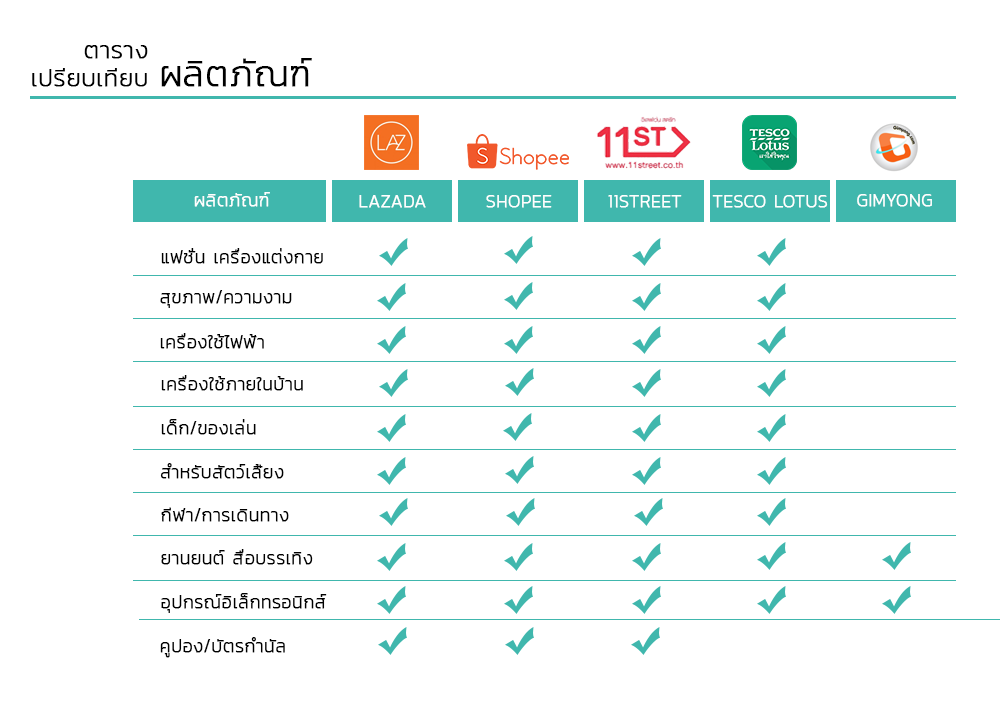
<style>
.page{position:relative;width:1000px;height:726px;background:#ffffff}
.page>*{position:absolute;margin:0}
.t1{font:24px/28px "Kanit-ExtraLight";color:#000000;font-weight:bold}
.t2{font:36px/28px "Kanit-ExtraLight";color:#000000;font-weight:bold}
.t3{font:18px "Kanit-ExtraLight";color:#ffffff;font-weight:bold}
.t4{font:18px "Kanit-ExtraLight";color:#000000;font-weight:bold}
</style>
<div class="page">
<p class="t1" style="left:32px;top:45px;width:280px;height:42px">ตาราง<br>เปรียบเทียบ <span class="t2">ผลิตภัณฑ์</span></p>
<p class="t3" style="left:194px;top:192px;width:76px;height:15px">ผลิตภัณฑ์</p>
<p class="t3" style="left:359px;top:195px;width:67px;height:13px">LAZADA</p>
<p class="t3" style="left:486px;top:195px;width:66px;height:13px">SHOPEE</p>
<p class="t3" style="left:608px;top:195px;width:74px;height:13px">11STREET</p>
<p class="t3" style="left:712px;top:195px;width:116px;height:13px">TESCO LOTUS</p>
<p class="t3" style="left:857px;top:194px;width:75px;height:13px">GIMYONG</p>
<p class="t4" style="left:161px;top:248px;width:162px;height:16px">แฟชั่น เครื่องแต่งกาย</p>
<p class="t4" style="left:160px;top:290px;width:132px;height:18px">สุขภาพ/ความงาม</p>
<p class="t4" style="left:160px;top:333px;width:104px;height:16px">เครื่องใช้ไฟฟ้า</p>
<p class="t4" style="left:161px;top:375px;width:142px;height:16px">เครื่องใช้ภายในบ้าน</p>
<p class="t4" style="left:161px;top:419px;width:95px;height:16px">เด็ก/ของเล่น</p>
<p class="t4" style="left:160px;top:463px;width:124px;height:16px">สำหรับสัตว์เลี้ยง</p>
<p class="t4" style="left:161px;top:507px;width:128px;height:15px">กีฬา/การเดินทาง</p>
<p class="t4" style="left:161px;top:549px;width:152px;height:16px">ยานยนต์ สื่อบรรเทิง</p>
<p class="t4" style="left:161px;top:593px;width:166px;height:20px">อุปกรณ์อิเล็กทรอนิกส์</p>
<p class="t4" style="left:160px;top:637px;width:125px;height:21px">คูปอง/บัตรกำนัล</p>
</div>
